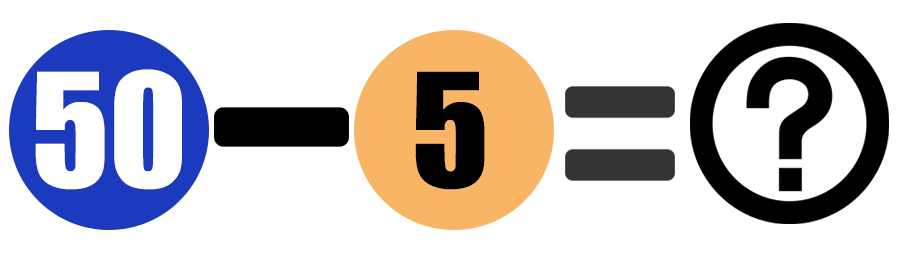
<style>
.page{position:relative;width:900px;height:257px;background:#ffffff}
.page>*{position:absolute;margin:0}
.t1{font:145.8px "Impact";color:#ffffff}
.t2{font:145.8px "Impact";color:#000000}
</style>
<div class="page">
<p class="t1" style="left:35px;top:69px;width:147px;height:121px">50</p>
<p class="t2" style="left:415px;top:71px;width:70px;height:119px">5</p>
</div>
